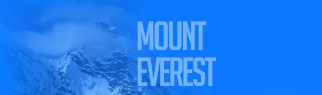
<style>
.page{position:relative;width:322px;height:95px;background:#0a79fe}
.page>*{position:absolute;margin:0}
.t1{font:39.8px/36px "BigNoodleTitling";letter-spacing:-0.05em;color:#71b1fe;text-transform:uppercase}
</style>
<div class="page">
<p class="t1" style="left:137px;top:21px;width:79px;height:65px">MOUNT<br>EVEREST</p>
</div>
